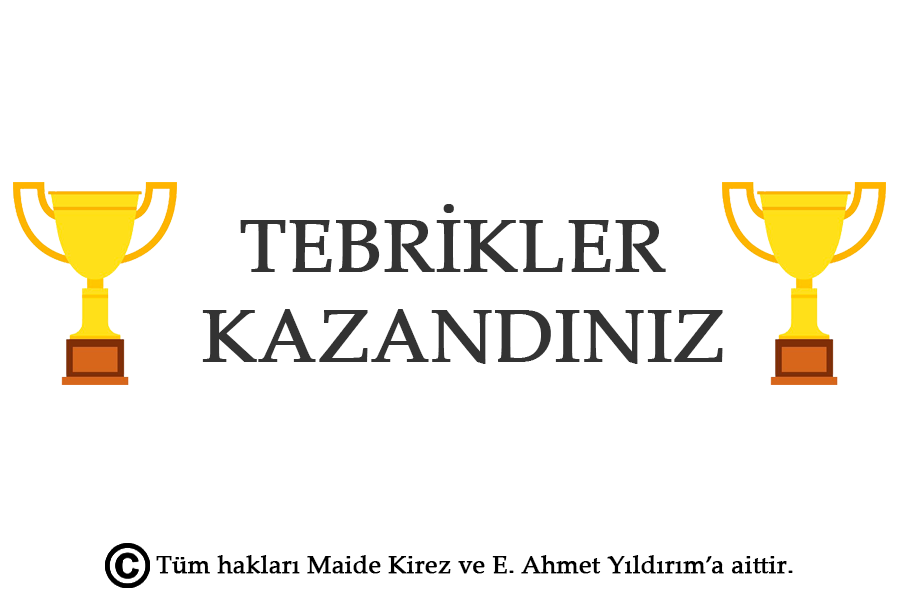
<style>
.page{position:relative;width:900px;height:600px;background:#ffffff}
.page>*{position:absolute;margin:0}
.t1{font:75px "PalatinoLinotype-Roman";color:#333333;font-weight:bold}
.t2{font:25px "PalatinoLinotype-Roman";color:#000000;font-weight:bold}
</style>
<div class="page">
<p class="t1" style="left:202px;top:204px;width:521px;height:160px;text-align:center">TEBRİKLER <br>KAZANDINIZ</p>
<p class="t2" style="left:156px;top:555px;width:637px;height:19px">Tüm hakları Maide Kirez ve E. Ahmet Yıldırım’a aittir.</p>
</div>
